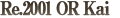
<style>
.page{position:relative;width:120px;height:18px;background:#ffffff}
.page>*{position:absolute;margin:0}
.t1{font:18px "RyuminPro-ExBold";letter-spacing:-0.08em;color:#4a3f32;font-weight:bold;scale:0.9 1}
</style>
<div class="page">
<p class="t1" style="left:0px;top:1px;width:110px;height:15px">Re.2001 OR Kai</p>
</div>
